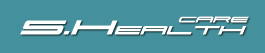
<style>
.page{position:relative;width:265px;height:53px;background:#44919d}
.page>*{position:absolute;margin:0}
.t1{font:12px "Ultra911Italic";color:#feffff}
.t2{font:18px "Ultra911Italic";color:#feffff}
.t3{font:30px "Ultra911Italic";color:#feffff}
</style>
<div class="page">
<p class="t1" style="left:178px;top:16px;width:71px;height:7px">care</p>
<p class="t2" style="left:20px;top:20px;width:226px;height:15px"><span class="t3">S.H</span>ealth</p>
</div>
